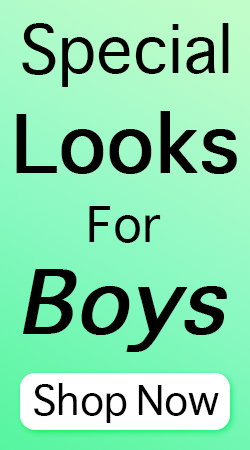
<style>
.page{position:relative;width:250px;height:450px}
.page>*{position:absolute;margin:0}
.t1{font:64px "Sathu";color:#000000}
.t2{font:77px "Sathu";color:#000000;font-weight:bold}
.t3{font:48px "Sathu";color:#000000}
.t4{font:85px "Sathu";color:#000000;font-weight:bold;font-style:italic}
.t5{font:40px "Sathu";color:#000000}
</style>
<div class="page">
<p class="t1" style="left:22px;top:23px;width:207px;height:64px">Special</p>
<p class="t2" style="left:16px;top:111px;width:221px;height:63px">Looks</p>
<p class="t3" style="left:89px;top:206px;width:72px;height:37px">For</p>
<p class="t4" style="left:23px;top:269px;width:204px;height:83px">Boys</p>
<p class="t5" style="left:34px;top:383px;width:185px;height:40px">Shop Now</p>
</div>
